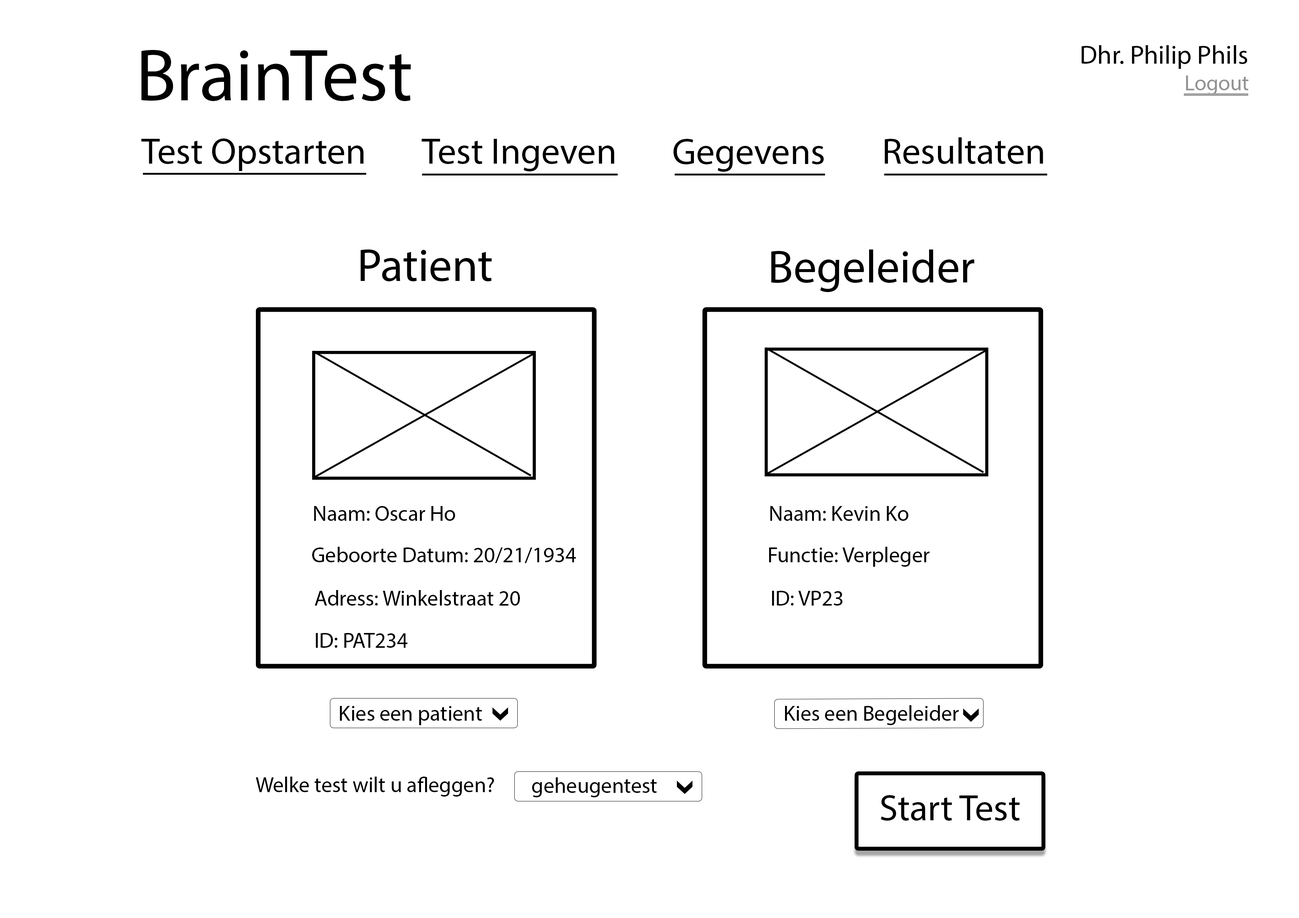
<style>
.page{position:relative;width:1299px;height:918px;background:#ffffff}
.page>*{position:absolute;margin:0}
.t1{font:74px "MyriadPro-Regular";color:#000000}
.t2{font:26.2px "MyriadPro-Regular";color:#000000}
.t3{font:21.6px "MyriadPro-Regular";color:#929292}
.t4{font:37px "MyriadPro-Regular";color:#000000}
.t5{font:46.3px "MyriadPro-Regular";color:#000000}
.t6{font:21.6px "MyriadPro-Regular";color:#000000}
</style>
<div class="page">
<p class="t1" style="left:141px;top:50px;width:270px;height:51px">BrainTest</p>
<p class="t2" style="left:1081px;top:45px;width:166px;height:24px">Dhr. Philip Phils</p>
<p class="t3" style="left:1186px;top:76px;width:62px;height:19px">Logout</p>
<p class="t4" style="left:884px;top:137px;width:159px;height:27px">Resultaten</p>
<p class="t4" style="left:141px;top:138px;width:223px;height:33px">Test Opstarten</p>
<p class="t4" style="left:421px;top:139px;width:193px;height:32px">Test Ingeven</p>
<p class="t4" style="left:673px;top:139px;width:151px;height:33px">Gegevens</p>
<p class="t5" style="left:361px;top:249px;width:131px;height:33px">Patient</p>
<p class="t5" style="left:771px;top:250px;width:203px;height:42px">Begeleider</p>
<p class="t6" style="left:314px;top:506px;width:141px;height:15px">Naam: Oscar Ho</p>
<p class="t6" style="left:770px;top:506px;width:138px;height:15px">Naam: Kevin Ko</p>
<p class="t6" style="left:312px;top:547px;width:264px;height:16px">Geboorte Datum: 20/21/1934</p>
<p class="t6" style="left:769px;top:547px;width:160px;height:20px">Functie: Verpleger</p>
<p class="t6" style="left:315px;top:590px;width:205px;height:16px">Adress: Winkelstraat 20</p>
<p class="t6" style="left:772px;top:591px;width:70px;height:15px">ID: VP23</p>
<p class="t6" style="left:316px;top:633px;width:92px;height:15px">ID: PAT234</p>
<p class="t6" style="left:340px;top:706px;width:142px;height:19px">Kies een patient</p>
<p class="t6" style="left:785px;top:705px;width:174px;height:20px">Kies een Begeleider</p>
<p class="t6" style="left:256px;top:777px;width:238px;height:20px">Welke test wilt u afleggen?</p>
<p class="t6" style="left:532px;top:777px;width:125px;height:20px">geheugentest</p>
<p class="t4" style="left:880px;top:795px;width:140px;height:26px">Start Test</p>
</div>
